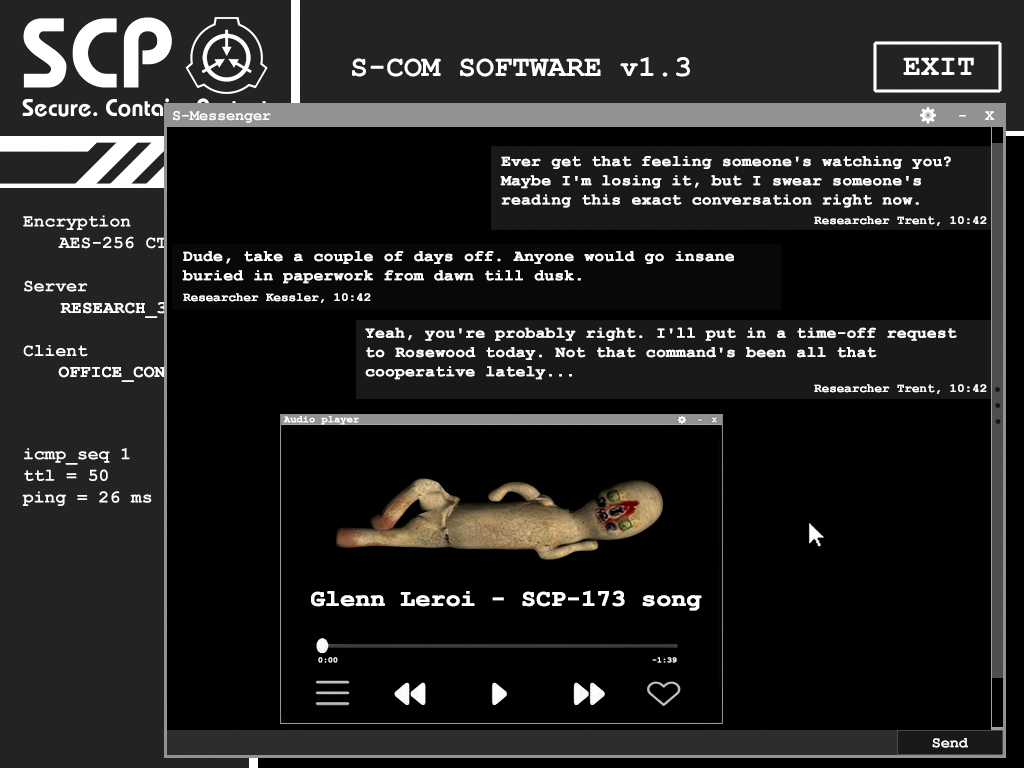
<style>
.page{position:relative;width:1024px;height:768px;background:#000000}
.page>*{position:absolute;margin:0}
.t1{font:16px "CourierNewPS-BoldMT";color:#ffffff;font-weight:bold}
.t2{font:12px "CourierNewPS-BoldMT";color:#ffffff;font-weight:bold}
.t3{font:17px "CourierNewPS-BoldMT";color:#ffffff;font-weight:bold}
.t4{font:10px "CourierNewPS-BoldMT";color:#ffffff;font-weight:bold}
.t5{font:24px "CourierNewPS-BoldMT";color:#ffffff;font-weight:bold}
.t6{font:8px "CourierNewPS-BoldMT";color:#ffffff;font-weight:bold}
</style>
<div class="page">
<p class="t1" style="left:500px;top:156px;width:451px;height:52px">Ever get that feeling someone's watching you? Maybe I'm losing it, but I swear someone's reading this exact conversation right now.</p>
<p class="t2" style="left:814px;top:216px;width:173px;height:10px">Researcher Trent, 10:42</p>
<p class="t1" style="left:182px;top:251px;width:552px;height:33px">Dude, take a couple of days off. Anyone would go insane buried in paperwork from dawn till dusk.</p>
<p class="t2" style="left:183px;top:293px;width:188px;height:10px">Researcher Kessler, 10:42</p>
<p class="t3" style="left:60px;top:302px;width:129px;height:16px">RESEARCH_3_A</p>
<p class="t1" style="left:365px;top:327px;width:592px;height:53px">Yeah, you're probably right. I'll put in a time-off request to Rosewood today. Not that command's been all that cooperative lately...</p>
<p class="t3" style="left:58px;top:366px;width:160px;height:16px">OFFICE_CONT_173</p>
<p class="t2" style="left:814px;top:384px;width:173px;height:10px">Researcher Trent, 10:42</p>
<p class="t4" style="left:283px;top:416px;width:76px;height:9px">Audio player</p>
<p class="t5" style="left:311px;top:590px;width:391px;height:21px">Glenn Leroi - SCP-173 song</p>
<p class="t6" style="left:318px;top:657px;width:20px;height:6px">0:00</p>
<p class="t6" style="left:652px;top:657px;width:25px;height:6px">-1:39</p>
</div>
